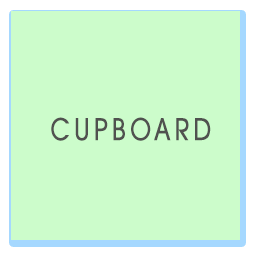
<style>
.page{position:relative;width:256px;height:256px;background:#ccfccb}
.page>*{position:absolute;margin:0}
.t1{font:30px "AvantGarde-Medium";letter-spacing:0.15em;color:#50514f;text-transform:uppercase;scale:0.84 1}
</style>
<div class="page">
<p class="t1" style="left:51px;top:117px;width:160px;height:24px">CUPBOARD</p>
</div>
